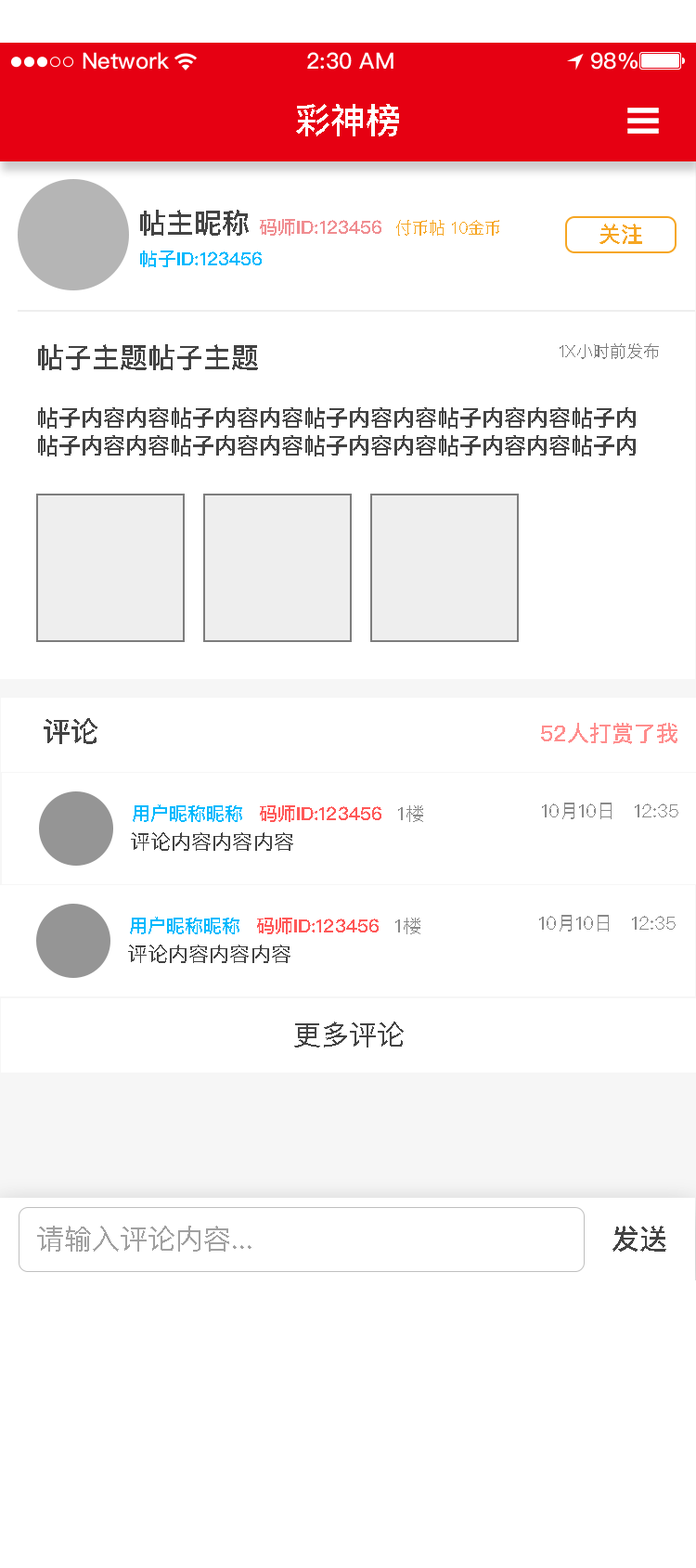
<style>
.page{position:relative;width:696px;height:1568px;background:#ffffff}
.page>*{position:absolute;margin:0}
.t1{font:35.3px "PingFangSC-Medium";color:#ffffff;text-transform:uppercase}
.t2{font:27.8px "PingFangSC-Medium";color:#434343;text-transform:uppercase}
.t3{font:18.6px "PingFangSC-Medium";color:#f08d91;text-transform:uppercase}
.t4{font:16.7px "PingFangSC-Regular";color:#f6a623;text-transform:uppercase}
.t5{font:22.3px "PingFangSC-Medium";color:#f6a623;text-transform:uppercase}
.t6{font:18.6px "PingFangSC-Medium";color:#01b9fd;text-transform:uppercase}
.t7{font:16.7px "PingFangSC-Regular";color:#7d7d7d;text-transform:uppercase}
.t8{font:22.3px/27.8px "PingFangSC-Medium";color:#434343;text-transform:uppercase}
.t9{font:22.3px "PingFangSC-Medium";color:#ff8d8d;text-transform:uppercase}
.t10{font:18.6px "PingFangSC-Medium";color:#ff5858;text-transform:uppercase}
.t11{font:18.6px "PingFangSC-Regular";color:#898989;text-transform:uppercase}
.t12{font:20.4px "PingFangSC-Regular";color:#434343;text-transform:uppercase}
.t13{font:27.8px "PingFangSC-Regular";color:#434343;text-transform:uppercase}
.t14{font:27.8px "PingFangSC-Regular";color:#a0a0a0;text-transform:uppercase}
</style>
<div class="page">
<p class="t1" style="left:296px;top:104px;width:103px;height:32px">彩神榜</p>
<p class="t2" style="left:140px;top:210px;width:109px;height:26px">帖主昵称</p>
<p class="t3" style="left:260px;top:219px;width:121px;height:17px">码师id:123456</p>
<p class="t4" style="left:396px;top:220px;width:103px;height:16px">付币帖 10金币</p>
<p class="t5" style="left:599px;top:224px;width:43px;height:20px">关注</p>
<p class="t6" style="left:140px;top:251px;width:122px;height:16px">帖子id:123456</p>
<p class="t2" style="left:38px;top:344px;width:220px;height:26px">帖子主题帖子主题</p>
<p class="t7" style="left:559px;top:343px;width:100px;height:16px">1x小时前发布</p>
<p class="t8" style="left:38px;top:407px;width:598px;height:49px;text-align:center">帖子内容内容帖子内容内容帖子内容内容帖子内容内容帖子内<br>帖子内容内容帖子内容内容帖子内容内容帖子内容内容帖子内</p>
<p class="t2" style="left:44px;top:718px;width:53px;height:26px">评论</p>
<p class="t9" style="left:541px;top:723px;width:136px;height:21px">52人打赏了我</p>
<p class="t6" style="left:133px;top:804px;width:109px;height:18px">用户昵称昵称</p>
<p class="t10" style="left:260px;top:805px;width:121px;height:17px">码师ID:123456</p>
<p class="t11" style="left:398px;top:805px;width:25px;height:17px">1楼</p>
<p class="t11" style="left:542px;top:803px;width:136px;height:16px">10月10日   12:35</p>
<p class="t12" style="left:131px;top:832px;width:162px;height:19px">评论内容内容内容</p>
<p class="t6" style="left:130px;top:917px;width:109px;height:17px">用户昵称昵称</p>
<p class="t10" style="left:257px;top:918px;width:122px;height:16px">码师ID:123456</p>
<p class="t11" style="left:395px;top:918px;width:25px;height:16px">1楼</p>
<p class="t11" style="left:539px;top:915px;width:136px;height:17px">10月10日   12:35</p>
<p class="t12" style="left:128px;top:945px;width:162px;height:18px">评论内容内容内容</p>
<p class="t13" style="left:294px;top:1022px;width:110px;height:25px">更多评论</p>
<p class="t14" style="left:37px;top:1226px;width:214px;height:26px">请输入评论内容...</p>
<p class="t2" style="left:612px;top:1226px;width:54px;height:26px">发送</p>
</div>
